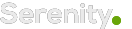
<style>
.page{position:relative;width:132px;height:29px;background:#ffffff}
.page>*{position:absolute;margin:0}
.t1{font:28px "NexaBold";color:#eaeaea}
</style>
<div class="page">
<p class="t1" style="left:0px;top:2px;width:113px;height:27px">Serenity</p>
<p class="t1" style="left:0px;top:2px;width:113px;height:27px">Serenity</p>
</div>
